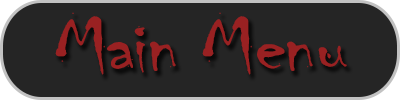
<style>
.page{position:relative;width:400px;height:100px;background:#252525}
.page>*{position:absolute;margin:0}
.t1{font:80px "Chiller-Regular";letter-spacing:-0.025em;color:#992122;scale:1.19 1}
</style>
<div class="page">
<p class="t1" style="left:55px;top:12px;width:292px;height:63px">Main Menu</p>
</div>
